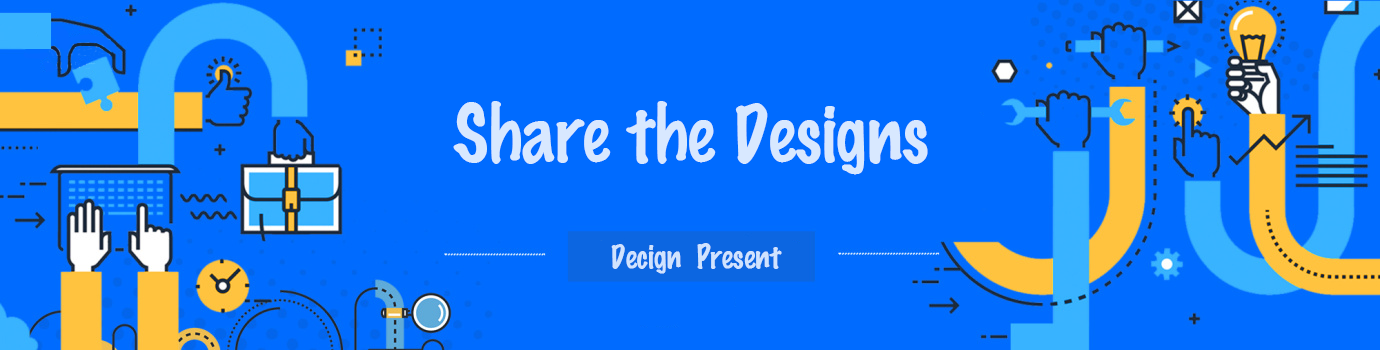
<style>
.page{position:relative;width:1380px;height:350px;background:#006bff}
.page>*{position:absolute;margin:0}
.t1{font:72px "MarkerFelt-Thin";color:#d8e8ff}
.t2{font:30px "MarkerFelt-Thin";color:#d0e3fe}
</style>
<div class="page">
<p class="t1" style="left:453px;top:101px;width:475px;height:74px">Share the Designs</p>
<p class="t2" style="left:611px;top:243px;width:171px;height:31px">Decign  Present</p>
</div>
